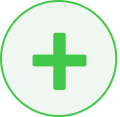
<style>
.page{position:relative;width:120px;height:117px;background:#eff7f0}
.page>*{position:absolute;margin:0}
.t1{font:104.8px "Roboto-Regular";color:#42c848;font-weight:bold}
</style>
<div class="page">
<p class="t1" style="left:32px;top:32px;width:55px;height:58px">+</p>
</div>
